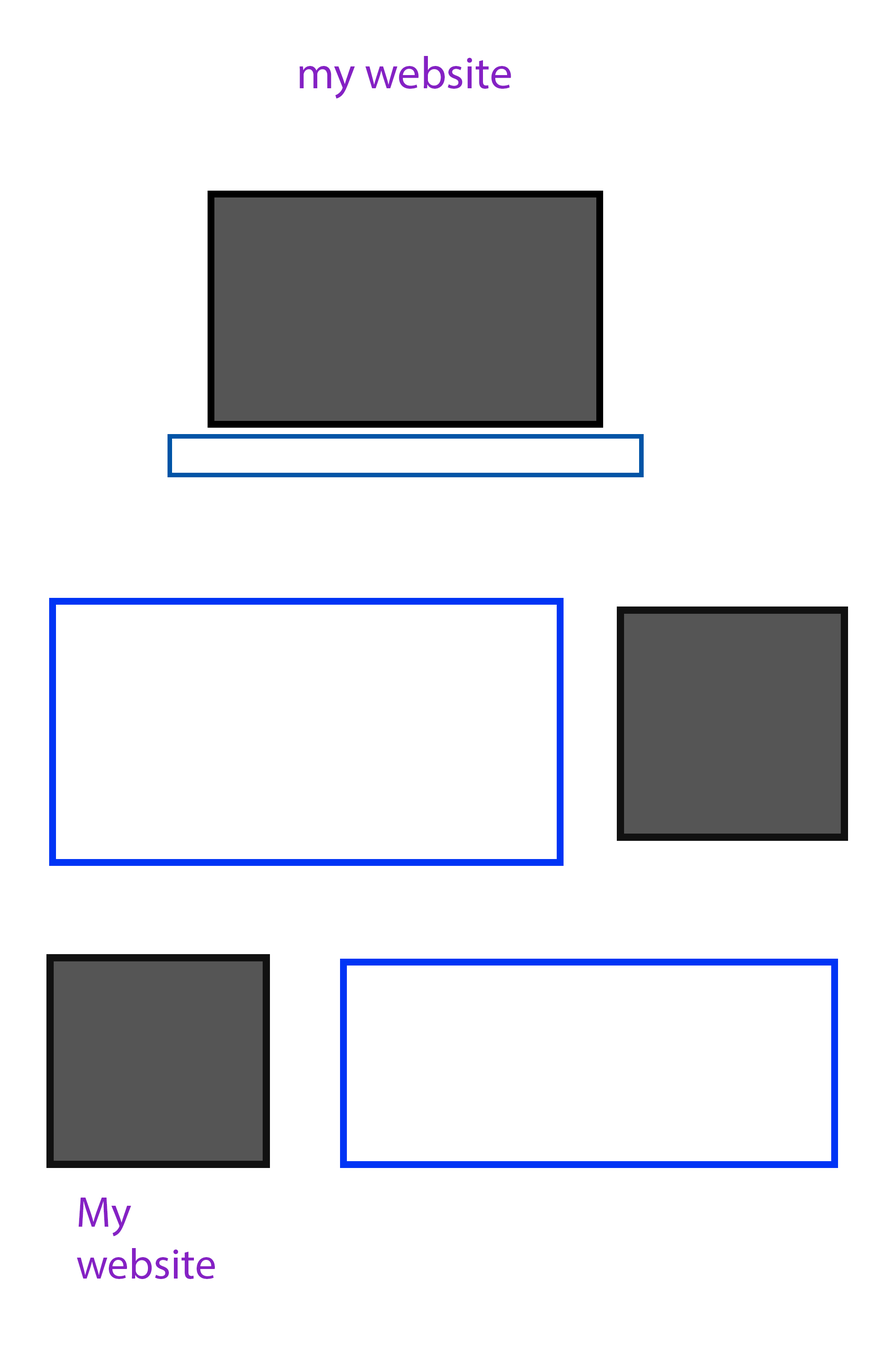
<style>
.page{position:relative;width:874px;height:1365px;background:#ffffff}
.page>*{position:absolute;margin:0}
.t1{font:45.5px "MyriadPro-Regular";color:#8521c4}
.t2{font:43.2px "MyriadPro-Regular";color:#8521c4}
</style>
<div class="page">
<p class="t1" style="left:299px;top:56px;width:212px;height:43px">my website</p>
<p class="t2" style="left:77px;top:1198px;width:138px;height:81px">My<br>website</p>
</div>
